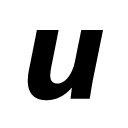
<style>
.page{position:relative;width:128px;height:128px;background:#ffffff}
.page>*{position:absolute;margin:0}
.t1{font:140px "MyriadPro-BoldIt";color:#000000;scale:1.06 1}
</style>
<div class="page">
<p class="t1" style="left:27px;top:30px;width:76px;height:71px">u</p>
</div>
